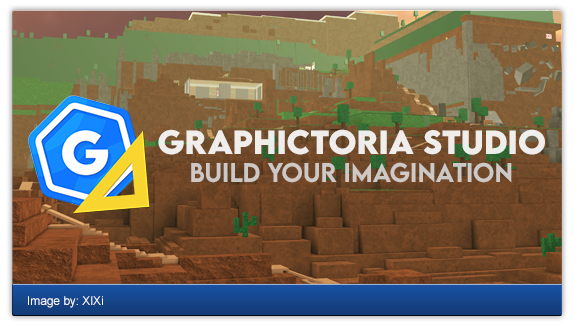
<style>
.page{position:relative;width:575px;height:326px}
.page>*{position:absolute;margin:0}
.t1{font:30px "LEMONMILK-Bold";color:#ffffff}
.t2{font:24px "LEMONMILK-Medium";color:#cec9c5}
.t3{font:12px "ArialMT";color:#ffffff}
</style>
<div class="page">
<p class="t1" style="left:158px;top:129px;width:387px;height:26px">Graphictoria Studio</p>
<p class="t2" style="left:191px;top:162px;width:321px;height:21px">Build your imagination</p>
<p class="t3" style="left:28px;top:296px;width:75px;height:12px">Image by: XlXi</p>
</div>
